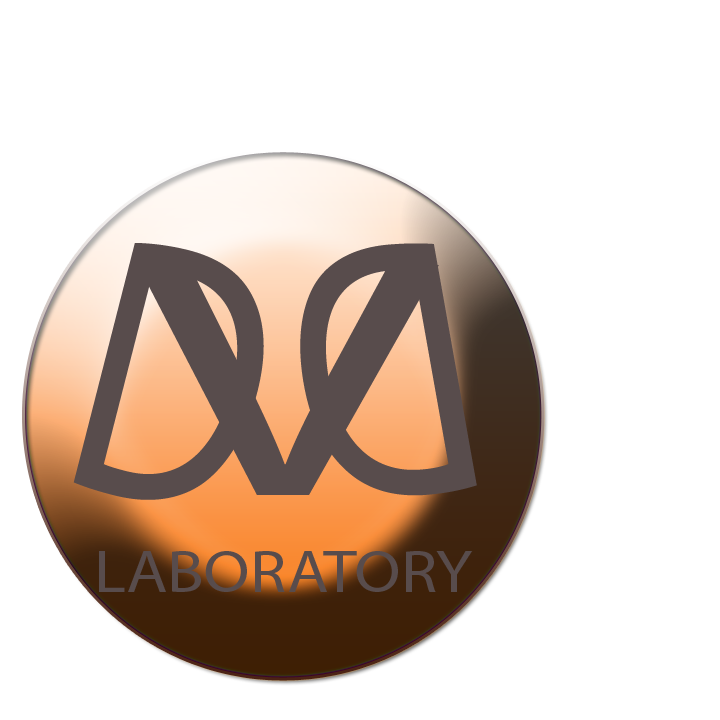
<style>
.page{position:relative;width:720px;height:720px;background:#ffffff}
.page>*{position:absolute;margin:0}
.t1{font:373.1px "MyriadPro-Regular";color:#584c4c;scale:0.75 1}
.t2{font:369.9px "MyriadPro-Regular";color:#584c4c;scale:0.75 1}
.t3{font:341px "MyriadPro-Regular";color:#584c4c;scale:1.58 1}
.t4{font:59.6px "MyriadPro-Regular";color:#584c4c;scale:1.13 1}
</style>
<div class="page">
<p class="t1" style="left:73px;top:243px;width:191px;height:257px;rotate:14deg">D</p>
<p class="t2" style="left:300px;top:243px;width:177px;height:253px;rotate:175deg">D</p>
<p class="t3" style="left:138px;top:265px;width:301px;height:230px">V</p>
<p class="t4" style="left:99px;top:551px;width:374px;height:41px">LABORATORY</p>
</div>
